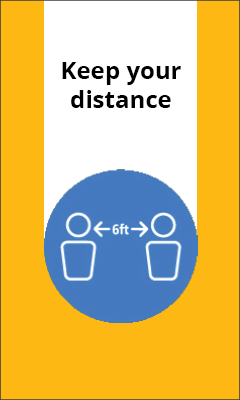
<style>
.page{position:relative;width:240px;height:400px;background:#fdb813}
.page>*{position:absolute;margin:0}
.t1{font:24px "OpenSans-Bold";color:#000000}
</style>
<div class="page">
<p class="t1" style="left:62px;top:62px;width:119px;height:46px;text-align:center">Keep your distance</p>
</div>
